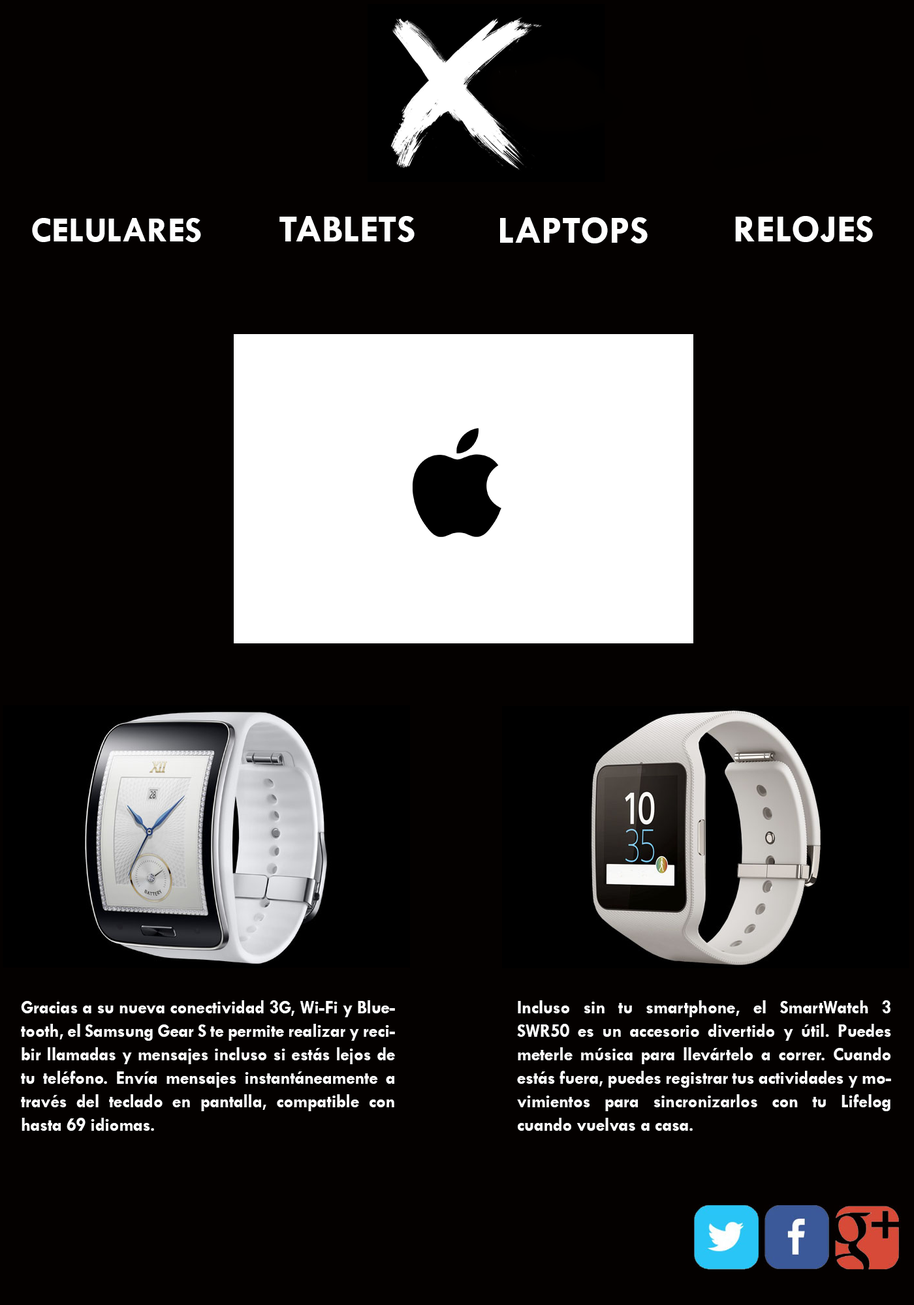
<style>
.page{position:relative;width:914px;height:1305px;background:#040100}
.page>*{position:absolute;margin:0}
.t1{font:35.9px "TwCenMT-Bold";color:#fefefe}
.t2{font:19.6px "TwCenMT-Bold";color:#fefefe}
.t3{font:39.2px "TwCenMT-Bold";color:#fefefe}
.t4{font:19.6px "TwCenMT-Bold";color:#fefefe;scale:0.92 1}
</style>
<div class="page">
<p class="t1" style="left:32px;top:218px;width:169px;height:24px"><span class="t2"><br></span>CELULARES</p>
<p class="t3" style="left:279px;top:216px;width:135px;height:26px">TABLETS</p>
<p class="t3" style="left:500px;top:217px;width:147px;height:26px">LAPTOPS</p>
<p class="t3" style="left:735px;top:216px;width:138px;height:26px">RELOJES</p>
<p class="t4" style="left:21px;top:1000px;width:374px;height:131px;text-align:justify">Gracias a su nueva conectividad 3G, Wi-Fi y Bluetooth, el Samsung Gear S te permite realizar y recibir llamadas y mensajes incluso si estás lejos de tu teléfono. Envía mensajes instantáneamente a través del teclado en pantalla, compatible con hasta 69 idiomas.</p>
<p class="t4" style="left:517px;top:1000px;width:374px;height:131px;text-align:justify">Incluso sin tu smartphone, el SmartWatch 3 SWR50 es un accesorio divertido y útil. Puedes meterle música para llevártelo a correr. Cuando estás fuera, puedes registrar tus actividades y movimientos para sincronizarlos con tu Lifelog cuando vuelvas a casa.</p>
</div>
